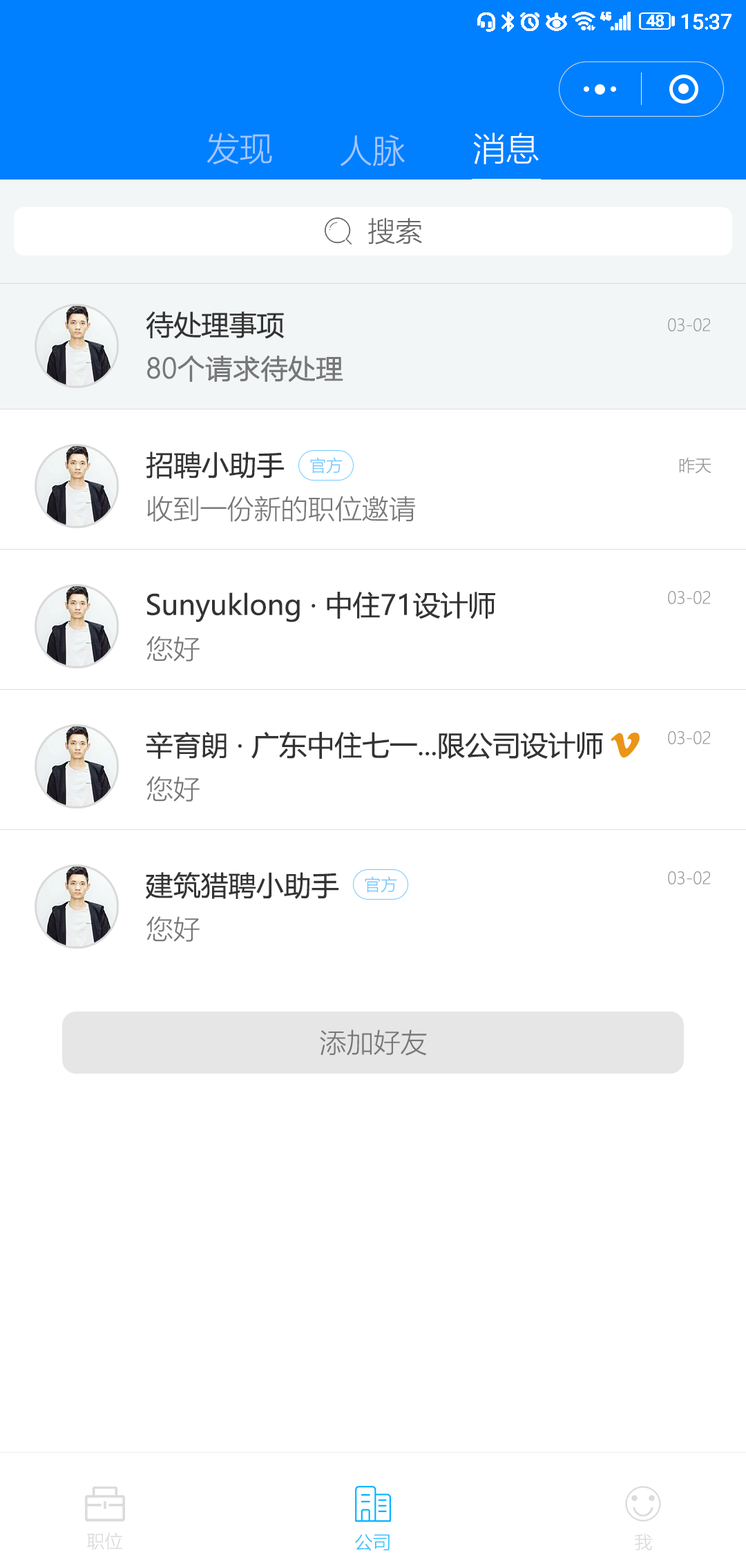
<style>
.page{position:relative;width:746px;height:1568px;background:#ffffff}
.page>*{position:absolute;margin:0}
.t1{font:33.1px "MicrosoftYaHeiLight";color:#a3c6ff}
.t2{font:33.1px "MicrosoftYaHeiLight";color:#ffffff}
.t3{font:27.5px "MicrosoftYaHeiLight";color:#666666}
.t4{font:27.6px "MicrosoftYaHei";color:#333333}
.t5{font:16.6px "MicrosoftYaHeiLight";color:#999999}
.t6{font:26.9px "MicrosoftYaHeiLight";color:#777777;font-weight:bold}
.t7{font:16.6px "MicrosoftYaHeiLight";color:#70c8ff}
.t8{font:26.9px "MicrosoftYaHeiLight";color:#777777}
.t9{font:18px "MicrosoftYaHeiLight";color:#dbdbdb}
.t10{font:18px "MicrosoftYaHeiLight";color:#32c2ff}
</style>
<div class="page">
<p class="t1" style="left:207px;top:133px;width:65px;height:31px">发现</p>
<p class="t1" style="left:340px;top:135px;width:65px;height:31px">人脉</p>
<p class="t2" style="left:473px;top:133px;width:66px;height:31px">消息</p>
<p class="t3" style="left:368px;top:217px;width:54px;height:27px">搜索</p>
<p class="t4" style="left:146px;top:311px;width:138px;height:28px">待处理事项</p>
<p class="t5" style="left:668px;top:318px;width:42px;height:13px">03-02</p>
<p class="t6" style="left:147px;top:356px;width:196px;height:27px">80个请求待处理</p>
<p class="t4" style="left:146px;top:452px;width:138px;height:26px">招聘小助手</p>
<p class="t7" style="left:310px;top:457px;width:32px;height:17px">官方</p>
<p class="t5" style="left:679px;top:457px;width:32px;height:17px">昨天</p>
<p class="t8" style="left:147px;top:496px;width:268px;height:26px">收到一份新的职位邀请</p>
<p class="t4" style="left:147px;top:592px;width:348px;height:30px">Sunyuklong · 中住71设计师</p>
<p class="t5" style="left:668px;top:591px;width:42px;height:13px">03-02</p>
<p class="t8" style="left:146px;top:636px;width:54px;height:25px">您好</p>
<p class="t4" style="left:146px;top:732px;width:457px;height:27px">辛育朗 · 广东中住七一...限公司设计师</p>
<p class="t5" style="left:668px;top:731px;width:42px;height:13px">03-02</p>
<p class="t8" style="left:146px;top:776px;width:54px;height:26px">您好</p>
<p class="t4" style="left:146px;top:872px;width:193px;height:27px">建筑猎聘小助手</p>
<p class="t7" style="left:365px;top:876px;width:32px;height:17px">官方</p>
<p class="t5" style="left:668px;top:871px;width:42px;height:13px">03-02</p>
<p class="t8" style="left:146px;top:916px;width:54px;height:26px">您好</p>
<p class="t8" style="left:320px;top:1029px;width:107px;height:27px">添加好友</p>
<p class="t9" style="left:87px;top:1532px;width:35px;height:18px">职位</p>
<p class="t10" style="left:355px;top:1534px;width:34px;height:17px">公司</p>
<p class="t9" style="left:635px;top:1533px;width:17px;height:18px">我</p>
</div>
